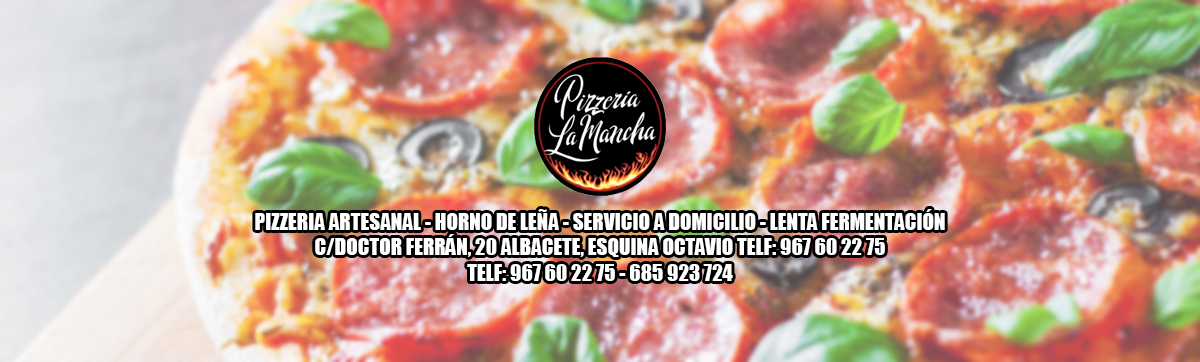
<style>
.page{position:relative;width:1200px;height:362px}
.page>*{position:absolute;margin:0}
.t1{font:21.1px "Impact";color:#ffffff}
</style>
<div class="page">
<p class="t1" style="left:255px;top:209px;width:690px;height:72px;text-align:center">PIZZERIA ARTESANAL - HORNO DE LEÑA - SERVICIO A DOMICILIO - LENTA FERMENTACIÓN<br>C/DOCTOR FERRÁN, 20 ALBACETE, ESQUINA OCTAVIO TELF: 967 60 22 75<br>TELF: 967 60 22 75 - 685 923 724</p>
</div>
